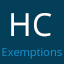
<style>
.page{position:relative;width:64px;height:64px;background:#043f59}
.page>*{position:absolute;margin:0}
.t1{font:32px "OpenSans";color:#ffffff}
.t2{font:11px "OpenSans";color:#158bc8}
</style>
<div class="page">
<p class="t1" style="left:11px;top:13px;width:41px;height:24px">HC</p>
<p class="t2" style="left:2px;top:47px;width:60px;height:12px">Exemptions</p>
</div>
